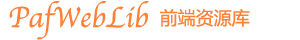
<style>
.page{position:relative;width:300px;height:40px;background:#ffffff}
.page>*{position:absolute;margin:0}
.t1{font:30px "Apple-Chancery";color:#ff8138}
.t2{font:18px "MicrosoftYaHei";color:#ff8138}
</style>
<div class="page">
<p class="t1" style="left:9px;top:1px;width:140px;height:39px">PafWebLib</p>
<p class="t2" style="left:160px;top:8px;width:90px;height:19px">前端资源库</p>
</div>
